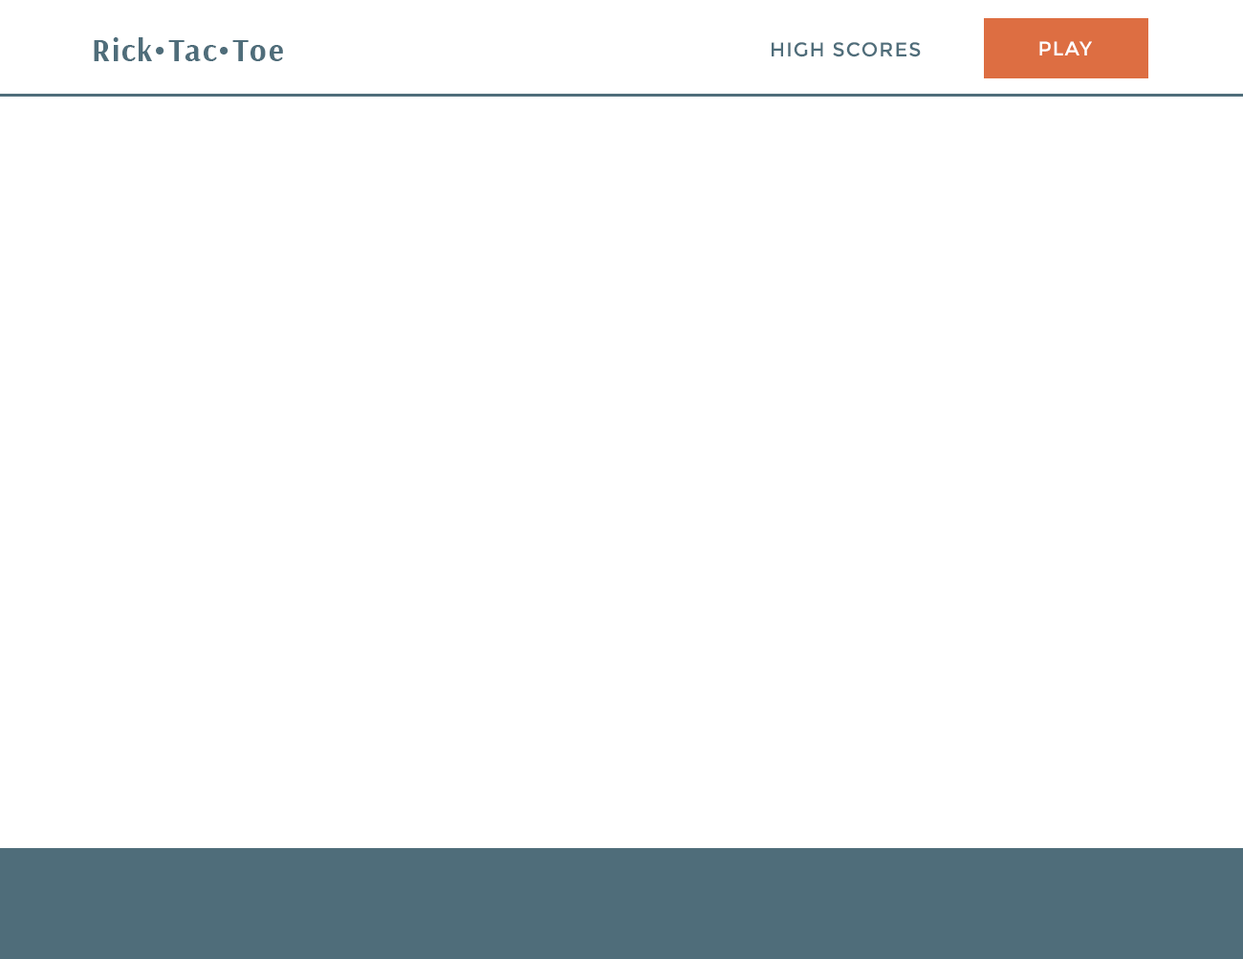
<style>
.page{position:relative;width:1243px;height:959px;background:#ffffff}
.page>*{position:absolute;margin:0}
.t1{font:31.9px "Arsenal-Bold";letter-spacing:0.05em;color:#4f6d7a}
.t2{font:19.9px "Montserrat-Regular";letter-spacing:0.05em;color:#ffffff}
.t3{font:19.9px "Montserrat-Regular";letter-spacing:0.05em;color:#4f6d7a}
</style>
<div class="page">
<p class="t1" style="left:94px;top:37px;width:189px;height:24px">Rick•Tac•Toe</p>
<p class="t2" style="left:1039px;top:41px;width:53px;height:14px">PLAY</p>
<p class="t3" style="left:772px;top:42px;width:149px;height:15px">HIGH SCORES</p>
</div>
